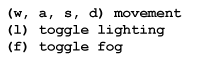
<style>
.page{position:relative;width:204px;height:66px;background:#ffffff}
.page>*{position:absolute;margin:0}
.t1{font:14px "CourierNewPS-BoldMT";color:#000000}
</style>
<div class="page">
<p class="t1" style="left:8px;top:8px;width:174px;height:46px">(w, a, s, d) movement<br>(l) toggle lighting<br>(f) toggle fog</p>
</div>
